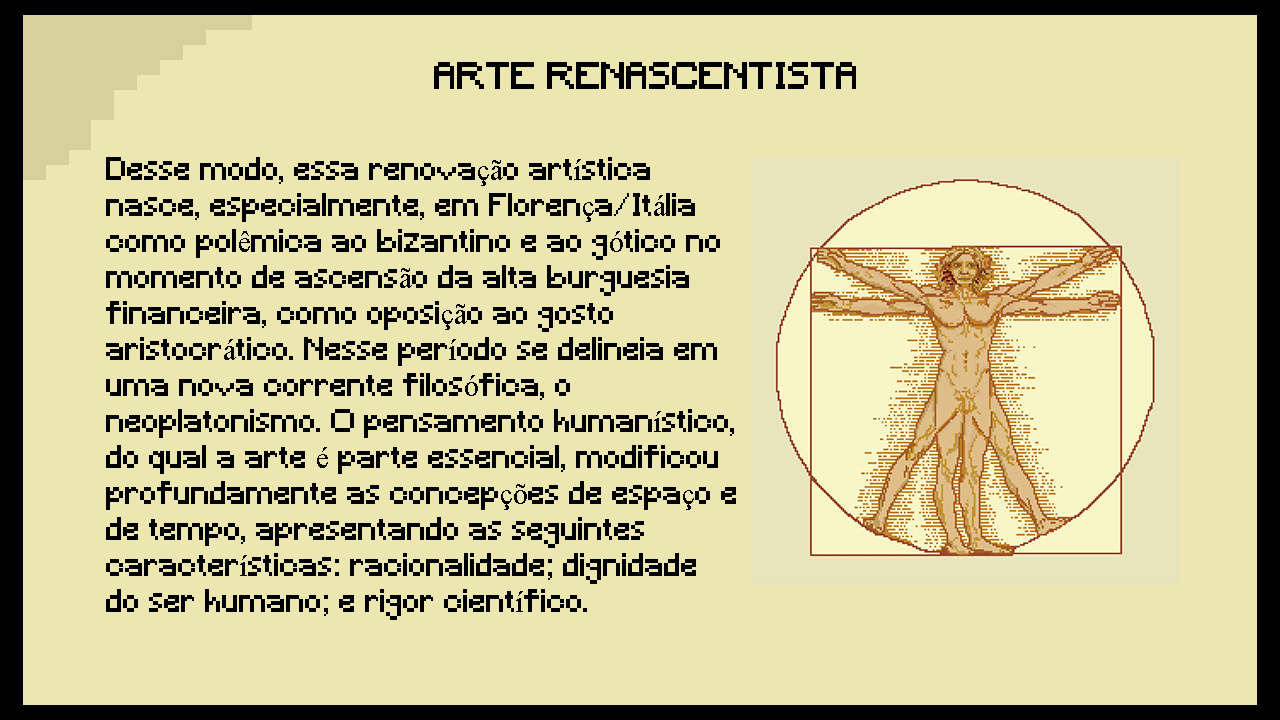
<style>
.page{position:relative;width:1280px;height:720px;background:#ece6b0}
.page>*{position:absolute;margin:0}
.t1{font:36px "Minecraft";color:#000000}
.t2{font:30px "Minecraft";color:#000000}
.t3{font:30px "TimesNewRomanPSMT";color:#000000}
</style>
<div class="page">
<p class="t1" style="left:434px;top:62px;width:422px;height:27px">ARTE RENASCENTISTA</p>
<p class="t2" style="left:106px;top:157px;width:630px;height:463px">Desse modo, essa renova<span class="t3">çã</span>o art<span class="t3">í</span>stica nasce, especialmente, em Floren<span class="t3">ç</span>a/It<span class="t3">á</span>lia como pol<span class="t3">ê</span>mica ao bizantino e ao g<span class="t3">ó</span>tico no momento de ascens<span class="t3">ã</span>o da alta burguesia financeira, como oposi<span class="t3">çã</span>o ao gosto aristocr<span class="t3">á</span>tico. Nesse per<span class="t3">í</span>odo se delineia em uma nova corrente filos<span class="t3">ó</span>fica, o neoplatonismo. O pensamento human<span class="t3">í</span>stico, do qual a arte <span class="t3">é</span> parte essencial, modificou profundamente as concep<span class="t3">çõ</span>es de espa<span class="t3">ç</span>o e de tempo, apresentando as seguintes caracter<span class="t3">í</span>sticas: racionalidade; dignidade do ser humano; e rigor cient<span class="t3">í</span>fico.</p>
</div>
